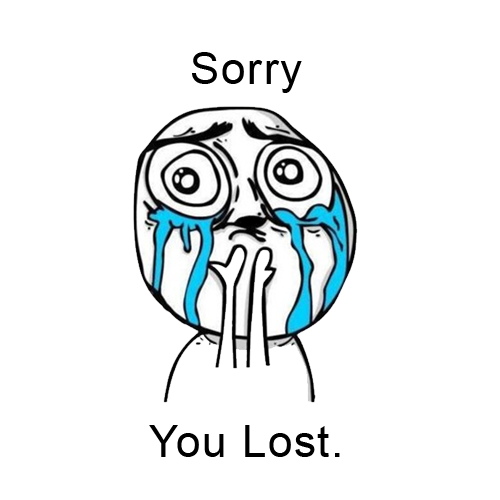
<style>
.page{position:relative;width:500px;height:500px;background:#ffffff}
.page>*{position:absolute;margin:0}
.t1{font:43.7px/186.6px "ArialMT";letter-spacing:0.04em;color:#000000}
</style>
<div class="page">
<p class="t1" style="left:149px;top:52px;width:191px;height:405px;text-align:center">Sorry<br><br>You Lost.</p>
</div>
